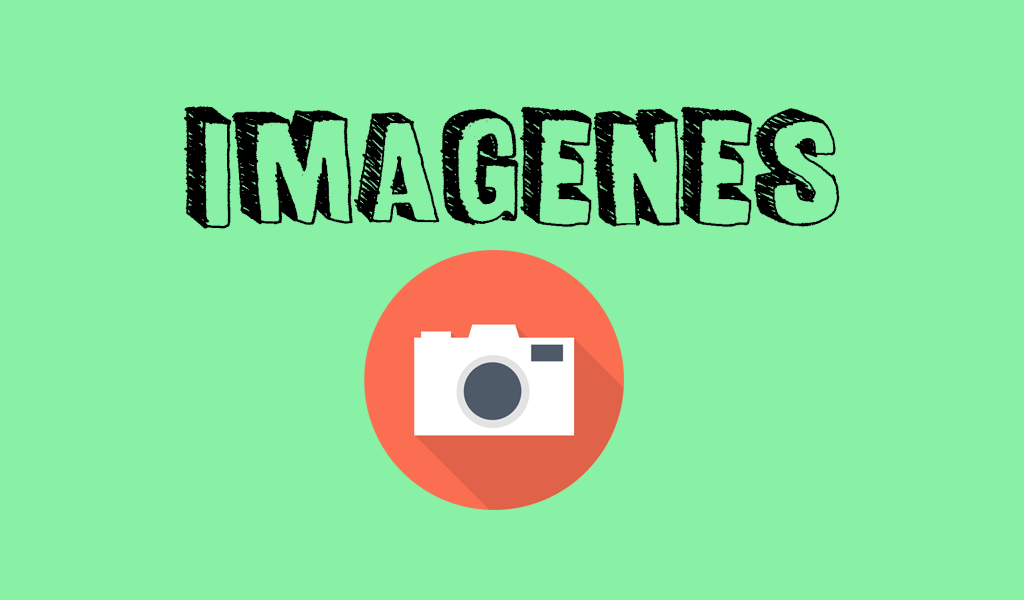
<style>
.page{position:relative;width:1024px;height:600px;background:#88f1a6}
.page>*{position:absolute;margin:0}
.t1{font:114.6px "FunSized";color:#000000}
</style>
<div class="page">
<p class="t1" style="left:184px;top:106px;width:656px;height:123px">Imagenes</p>
</div>
